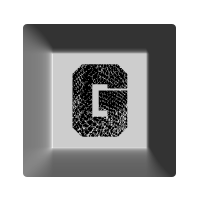
<style>
.page{position:relative;width:200px;height:200px;background:#ffffff}
.page>*{position:absolute;margin:0}
.t1{font:48px "SnakeJacket";color:#000000}
</style>
<div class="page">
<p class="t1" style="left:72px;top:64px;width:56px;height:73px">G</p>
</div>
